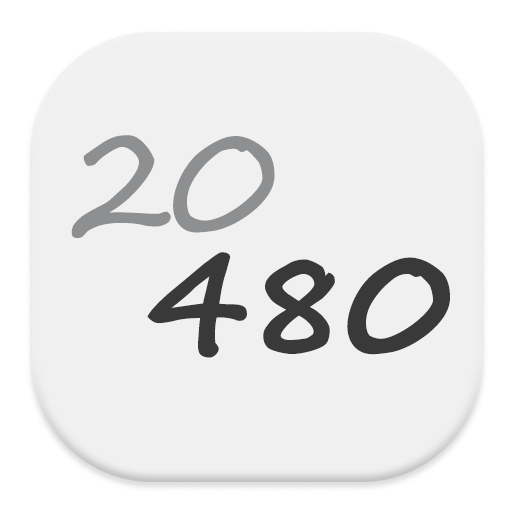
<style>
.page{position:relative;width:512px;height:512px;background:#f0f0f0}
.page>*{position:absolute;margin:0}
.t1{font:144px "SegoeScript";letter-spacing:-0.025em;color:#8e8f91}
.t2{font:144px "SegoeScript-Bold";letter-spacing:-0.025em;color:#393939}
</style>
<div class="page">
<p class="t1" style="left:71px;top:135px;width:204px;height:103px">20</p>
<p class="t2" style="left:147px;top:252px;width:303px;height:106px">480</p>
</div>
